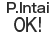
<style>
.page{position:relative;width:54px;height:36px;background:#ffffff}
.page>*{position:absolute;margin:0}
.t1{font:13px/14px "GothicMB101Pro-Medium";color:#2a2a2a}
.t2{font:18px/14px "GothicMB101Pro-Medium";letter-spacing:-0.04em;color:#2a2a2a;scale:0.8 1}
</style>
<div class="page">
<p class="t1" style="left:7px;top:2px;width:42px;height:30px;text-align:center">P.Intai<br><span class="t2">OK!</span></p>
</div>
